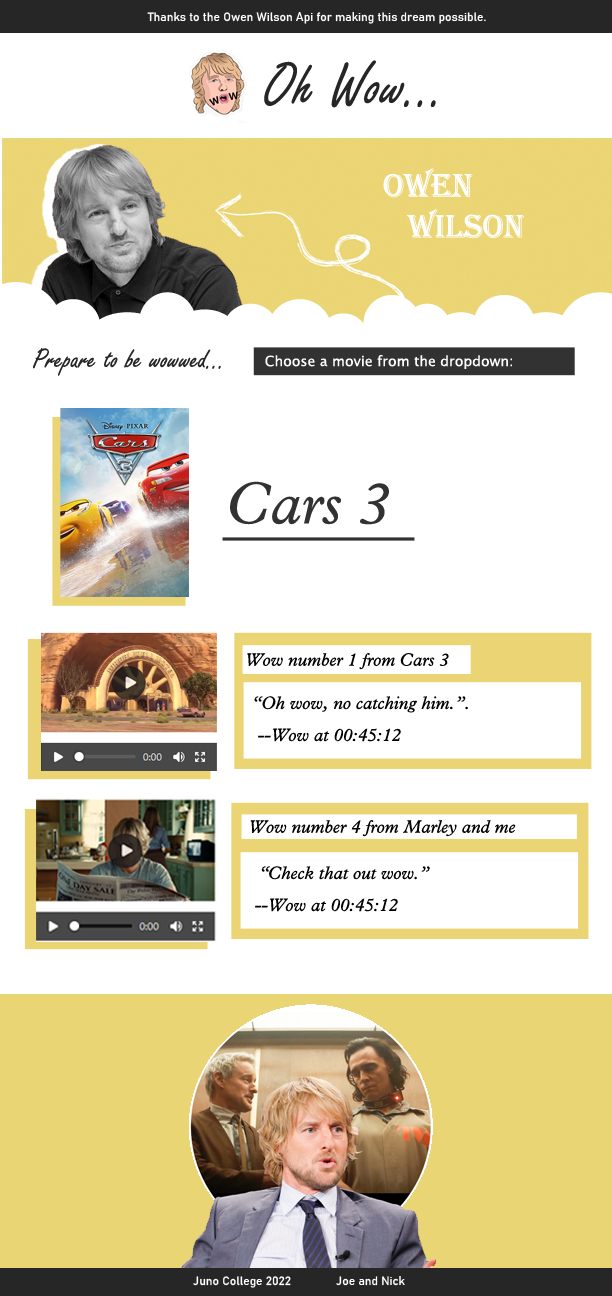
<style>
.page{position:relative;width:612px;height:1296px;background:#ffffff}
.page>*{position:absolute;margin:0}
.t1{font:12px "Bahnschrift";color:#ffffff}
.t2{font:65px "FreestyleScript-Regular";color:#272626}
.t3{font:34px "Algerian";color:#ffffff}
.t4{font:14px "LucidaSansUnicode";color:#ffffff}
.t5{font:60px "MPlantin-Italic";color:#333232}
.t6{font:18px "MPlantin-Italic";color:#000000}
</style>
<div class="page">
<p class="t1" style="left:147px;top:12px;width:339px;height:12px">Thanks to the Owen Wilson Api for making this dream possible.</p>
<p class="t2" style="left:264px;top:60px;width:172px;height:48px">Oh Wow...</p>
<p class="t3" style="left:383px;top:168px;width:141px;height:71px;text-align:center">OWEN<br>         WILSON</p>
<p class="t4" style="left:265px;top:355px;width:247px;height:14px">Choose a movie from the dropdown:</p>
<p class="t5" style="left:230px;top:481px;width:159px;height:44px">Cars 3</p>
<p class="t6" style="left:247px;top:653px;width:202px;height:17px">Wow number 1 from Cars 3</p>
<p class="t6" style="left:254px;top:696px;width:214px;height:17px">“Oh wow, no catching him.”.</p>
<p class="t6" style="left:258px;top:728px;width:143px;height:14px">--Wow at 00:45:12</p>
<p class="t6" style="left:250px;top:820px;width:266px;height:17px">Wow number 4 from Marley and me</p>
<p class="t6" style="left:261px;top:866px;width:169px;height:14px">“Check that out wow.”</p>
<p class="t6" style="left:255px;top:898px;width:143px;height:14px">--Wow at 00:45:12</p>
<p class="t1" style="left:193px;top:1276px;width:212px;height:12px">Juno College 2022              Joe and Nick</p>
</div>
